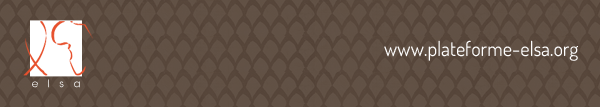
<style>
.page{position:relative;width:600px;height:107px}
.page>*{position:absolute;margin:0}
.t1{font:20px "Dosis-Regular";color:#ffffff}
.t2{font:10.4px "ITCAvantGardeStd-Bk";letter-spacing:0.9em}
</style>
<div class="page">
<p class="t1" style="left:384px;top:40px;width:194px;height:21px">www.plateforme-elsa.org</p>
<p class="t2" style="left:32px;top:79px;width:48px;height:9px">elsa</p>
</div>
